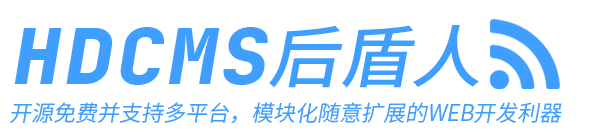
<style>
.page{position:relative;width:611px;height:132px;background:#ffffff}
.page>*{position:absolute;margin:0}
.t1{font:76px "JetBrainsMono-ExtraBoldItalic";letter-spacing:0.05em;color:#409eff;scale:1.05 1}
.t2{font:68px "SourceHanSansSC-Medium";color:#409eff;font-style:italic;scale:1.05 1}
.t3{font:22px "SourceHanSansSC-Normal";color:#409eff;font-style:italic}
</style>
<div class="page">
<p class="t1" style="left:14px;top:27px;width:254px;height:58px">HDCMS</p>
<p class="t2" style="left:269px;top:25px;width:210px;height:63px">后盾人</p>
<p class="t3" style="left:10px;top:102px;width:552px;height:22px">开源免费并支持多平台，模块化随意扩展的WEB开发利器</p>
</div>
